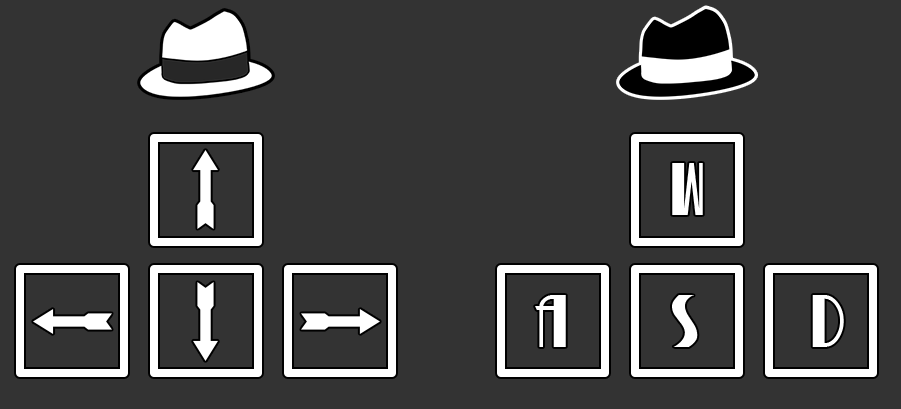
<style>
.page{position:relative;width:901px;height:409px;background:#333333}
.page>*{position:absolute;margin:0}
.t1{font:64.8px "BettyNoir";letter-spacing:0.1em;color:#ffffff}
</style>
<div class="page">
<p class="t1" style="left:672px;top:163px;width:31px;height:52px">W</p>
<p class="t1" style="left:535px;top:295px;width:31px;height:52px">A</p>
<p class="t1" style="left:672px;top:295px;width:26px;height:52px">S</p>
<p class="t1" style="left:812px;top:295px;width:32px;height:52px">D</p>
</div>
